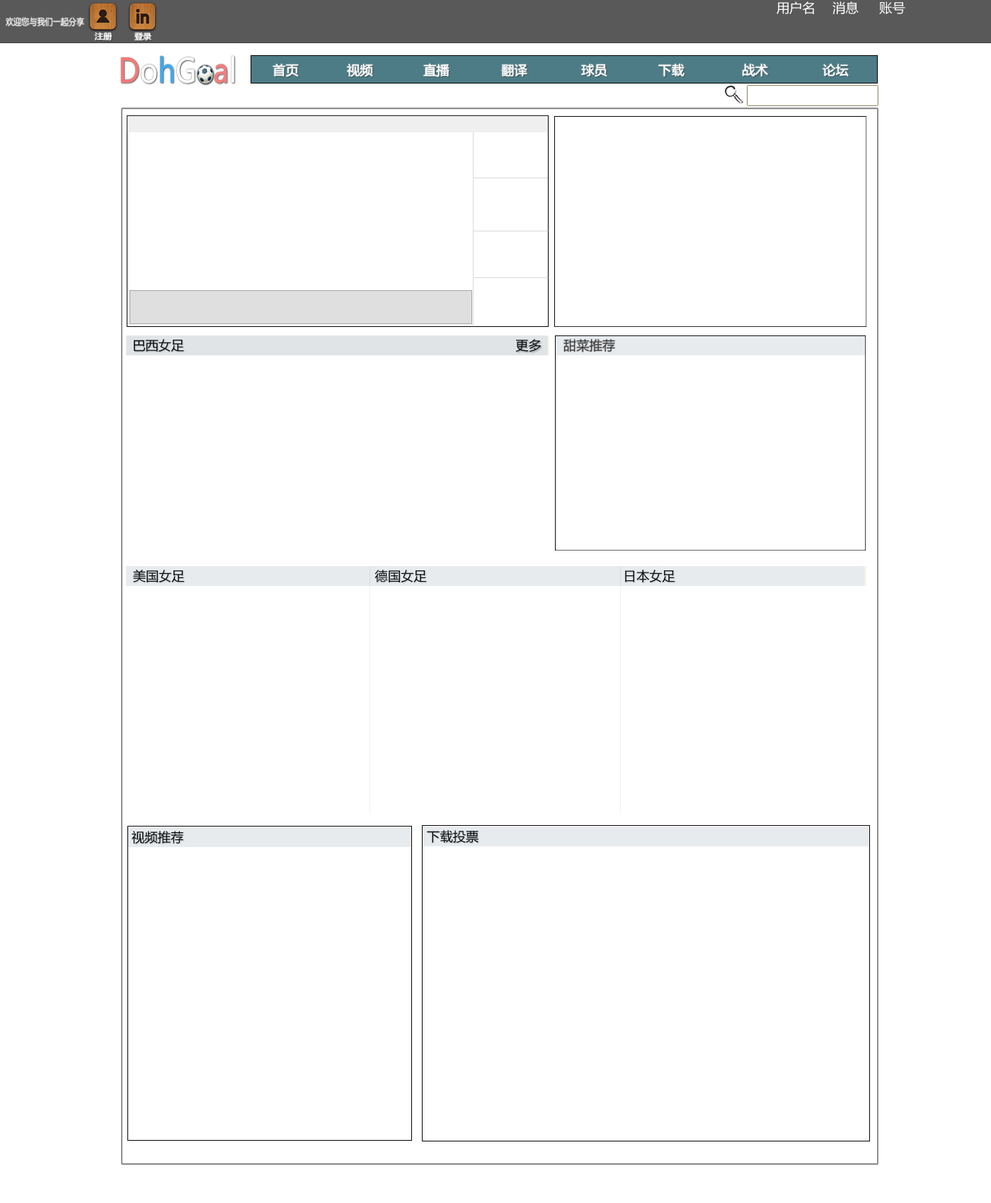
<style>
.page{position:relative;width:991px;height:1203px;background:#ffffff}
.page>*{position:absolute;margin:0}
.t1{font:12.9px "MicrosoftYaHei";color:#ffffff}
.t2{font:9.1px "MicrosoftYaHei";color:#ffffff;scale:0.87 1}
.t3{font:8px "MicrosoftYaHei";color:#ffffff;scale:1.05 1}
.t4{font:12.9px "MicrosoftYaHei";color:#000000}
</style>
<div class="page">
<p class="t1" style="left:776px;top:1px;width:38px;height:13px">用户名</p>
<p class="t1" style="left:832px;top:1px;width:27px;height:13px">消息</p>
<p class="t1" style="left:879px;top:1px;width:26px;height:13px">账号</p>
<p class="t2" style="left:6px;top:17px;width:78px;height:10px">欢迎您与我们一起分享</p>
<p class="t3" style="left:95px;top:32px;width:17px;height:8px">注册</p>
<p class="t3" style="left:134px;top:33px;width:17px;height:7px">登录</p>
<p class="t1" style="left:273px;top:64px;width:26px;height:13px">首页</p>
<p class="t1" style="left:347px;top:64px;width:26px;height:13px">视频</p>
<p class="t1" style="left:423px;top:64px;width:26px;height:13px">直播</p>
<p class="t1" style="left:501px;top:64px;width:26px;height:12px">翻译</p>
<p class="t1" style="left:581px;top:64px;width:26px;height:12px">球员</p>
<p class="t1" style="left:658px;top:64px;width:26px;height:12px">下载</p>
<p class="t1" style="left:743px;top:64px;width:25px;height:12px">战术</p>
<p class="t1" style="left:822px;top:64px;width:27px;height:12px">论坛</p>
<p class="t4" style="left:133px;top:570px;width:52px;height:13px">美国女足</p>
<p class="t4" style="left:374px;top:570px;width:53px;height:13px">德国女足</p>
<p class="t4" style="left:625px;top:570px;width:50px;height:13px">日本女足</p>
<p class="t4" style="left:132px;top:831px;width:51px;height:13px">视频推荐</p>
<p class="t4" style="left:427px;top:830px;width:51px;height:13px">下载投票</p>
</div>
